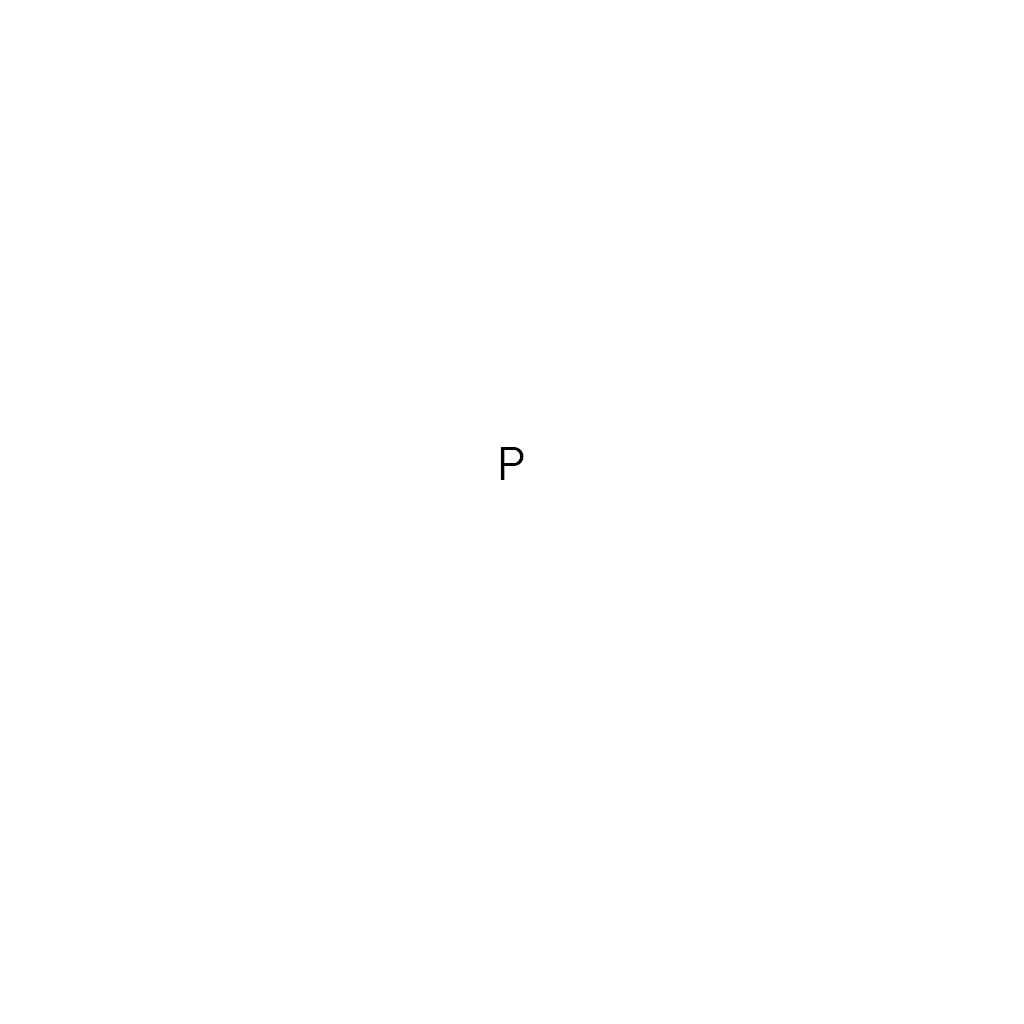
<style>
.page{position:relative;width:1024px;height:1024px;background:#ffffff}
.page>*{position:absolute;margin:0}
.t1{font:48px "MyanmarSangamMN";color:#030303}
</style>
<div class="page">
<p class="t1" style="left:500px;top:447px;width:24px;height:33px">P</p>
</div>
